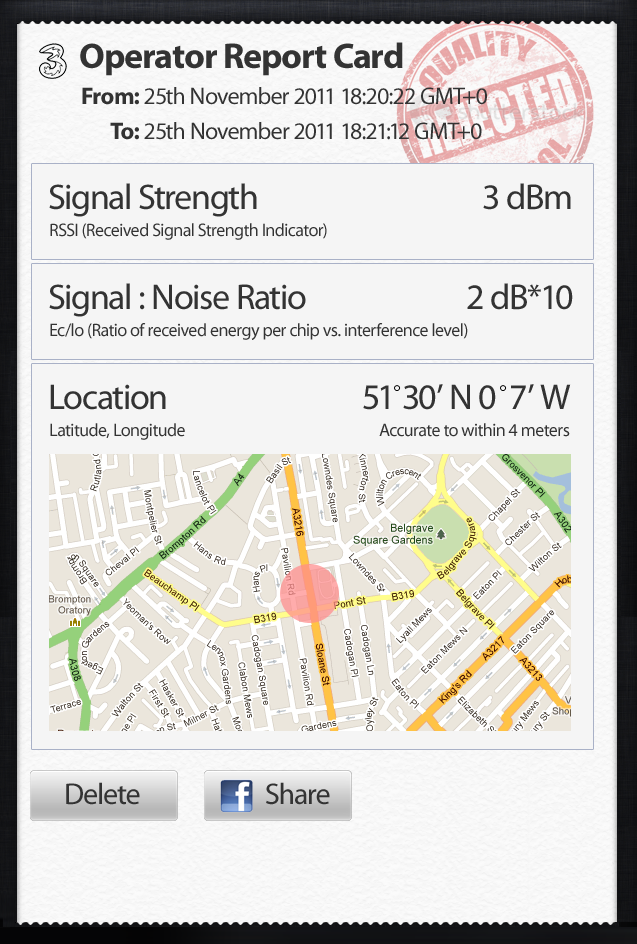
<style>
.page{position:relative;width:637px;height:944px;background:#f5f5f5}
.page>*{position:absolute;margin:0}
.t1{font:36px "MyriadPro-Bold";letter-spacing:-0.025em;color:#333333}
.t2{font:24px "MyriadPro-Regular";letter-spacing:-0.025em;color:#333333}
.t3{font:24px "MyriadPro-Bold";letter-spacing:-0.025em;color:#333333}
.t4{font:36px "MyriadPro-Regular";letter-spacing:-0.025em;color:#333333}
.t5{font:18px "MyriadPro-Regular";letter-spacing:-0.025em;color:#333333}
.t6{font:30px "MyriadPro-Regular";letter-spacing:-0.025em;color:#333333}
</style>
<div class="page">
<p class="t1" style="left:80px;top:42px;width:323px;height:34px">Operator Report Card</p>
<p class="t2" style="left:82px;top:87px;width:405px;height:18px"><span class="t3">From: </span>25th November 2011 18:20:22 GMT+0</p>
<p class="t2" style="left:110px;top:122px;width:372px;height:18px"><span class="t3">To: </span>25th November 2011 18:21:12 GMT+0</p>
<p class="t4" style="left:49px;top:183px;width:208px;height:34px">Signal Strength</p>
<p class="t4" style="left:483px;top:183px;width:88px;height:27px">3 dBm</p>
<p class="t5" style="left:50px;top:223px;width:277px;height:17px">RSSI (Received Signal Strength Indicator)</p>
<p class="t4" style="left:49px;top:283px;width:257px;height:34px">Signal : Noise Ratio</p>
<p class="t4" style="left:467px;top:283px;width:106px;height:27px">2 dB*10</p>
<p class="t5" style="left:50px;top:323px;width:418px;height:17px">Ec/lo (Ratio of received energy per chip vs. interference level)</p>
<p class="t4" style="left:50px;top:384px;width:116px;height:26px">Location</p>
<p class="t4" style="left:363px;top:384px;width:208px;height:26px">51 30’ N 0  7’ W</p>
<p class="t5" style="left:50px;top:423px;width:135px;height:17px">Latitude, Longitude</p>
<p class="t5" style="left:379px;top:423px;width:191px;height:14px">Accurate to within 4 meters</p>
<p class="t6" style="left:66px;top:782px;width:74px;height:23px">Delete</p>
<p class="t6" style="left:266px;top:782px;width:64px;height:23px">Share</p>
</div>
